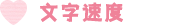
<style>
.page{position:relative;width:196px;height:25px;background:#ffffff}
.page>*{position:absolute;margin:0}
.t1{font:21.2px "shetumodengxiaofangti";color:#ef8299;font-weight:bold}
</style>
<div class="page">
<p class="t1" style="left:40px;top:2px;width:83px;height:20px">文字速度</p>
</div>
